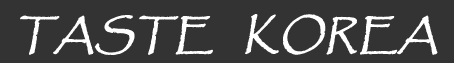
<style>
.page{position:relative;width:454px;height:63px;background:#333333}
.page>*{position:absolute;margin:0}
.t1{font:40px "Papyrus-Regular";color:#ffffff;font-weight:bold;font-style:italic}
.t2{font:45px "Papyrus-Regular";color:#000000}
</style>
<div class="page">
<p class="t1" style="left:20px;top:14px;width:418px;height:41px"><span class="t2"><br></span>TASTE   KOREA</p>
</div>
